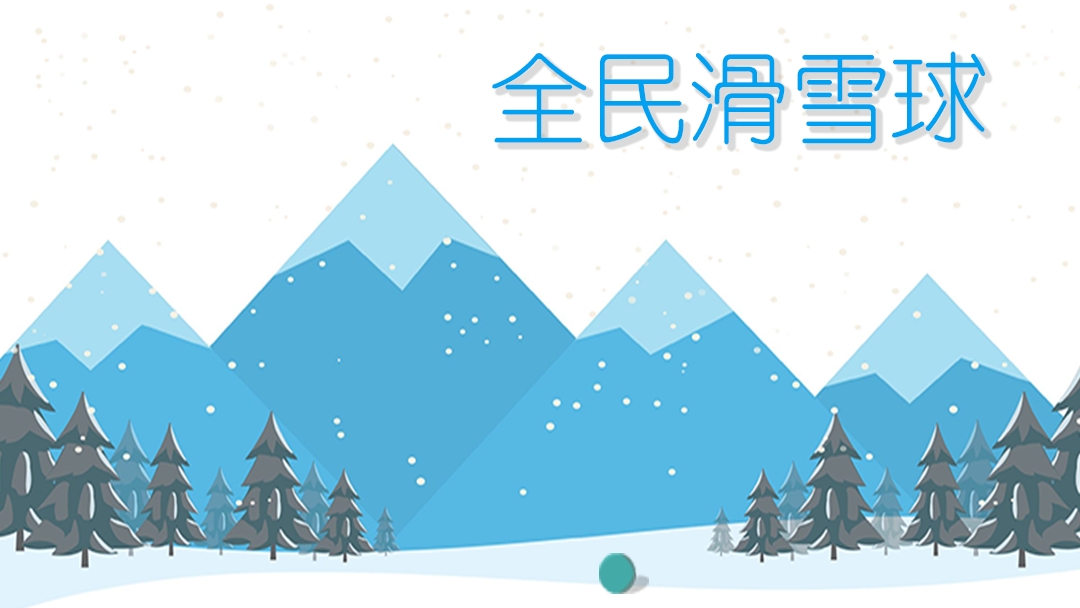
<style>
.page{position:relative;width:1080px;height:608px;background:#ffffff}
.page>*{position:absolute;margin:0}
.t1{font:100px "YouYuan";color:#00a1f1}
</style>
<div class="page">
<p class="t1" style="left:492px;top:51px;width:493px;height:94px">全民滑雪球</p>
</div>
